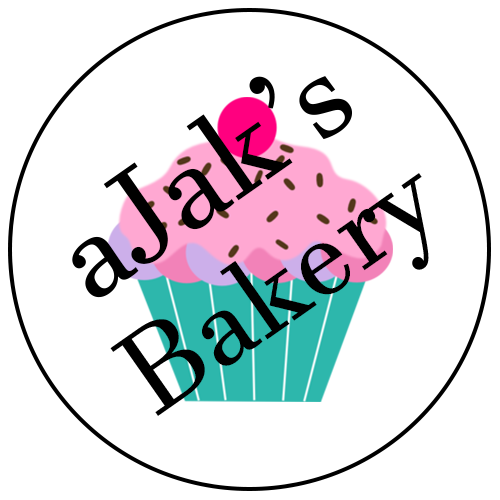
<style>
.page{position:relative;width:500px;height:500px;background:#ffffff}
.page>*{position:absolute;margin:0}
.t1{font:30.5px "JavaneseText";color:#000000}
.t2{font:28px "JavaneseText";color:#000000}
</style>
<div class="page">
<p class="t1" style="left:72px;top:76px;width:280px;height:222px;rotate:-35deg">aJak’s</p>
<p class="t2" style="left:110px;top:173px;width:319px;height:243px;rotate:-35deg">Bakery</p>
</div>
